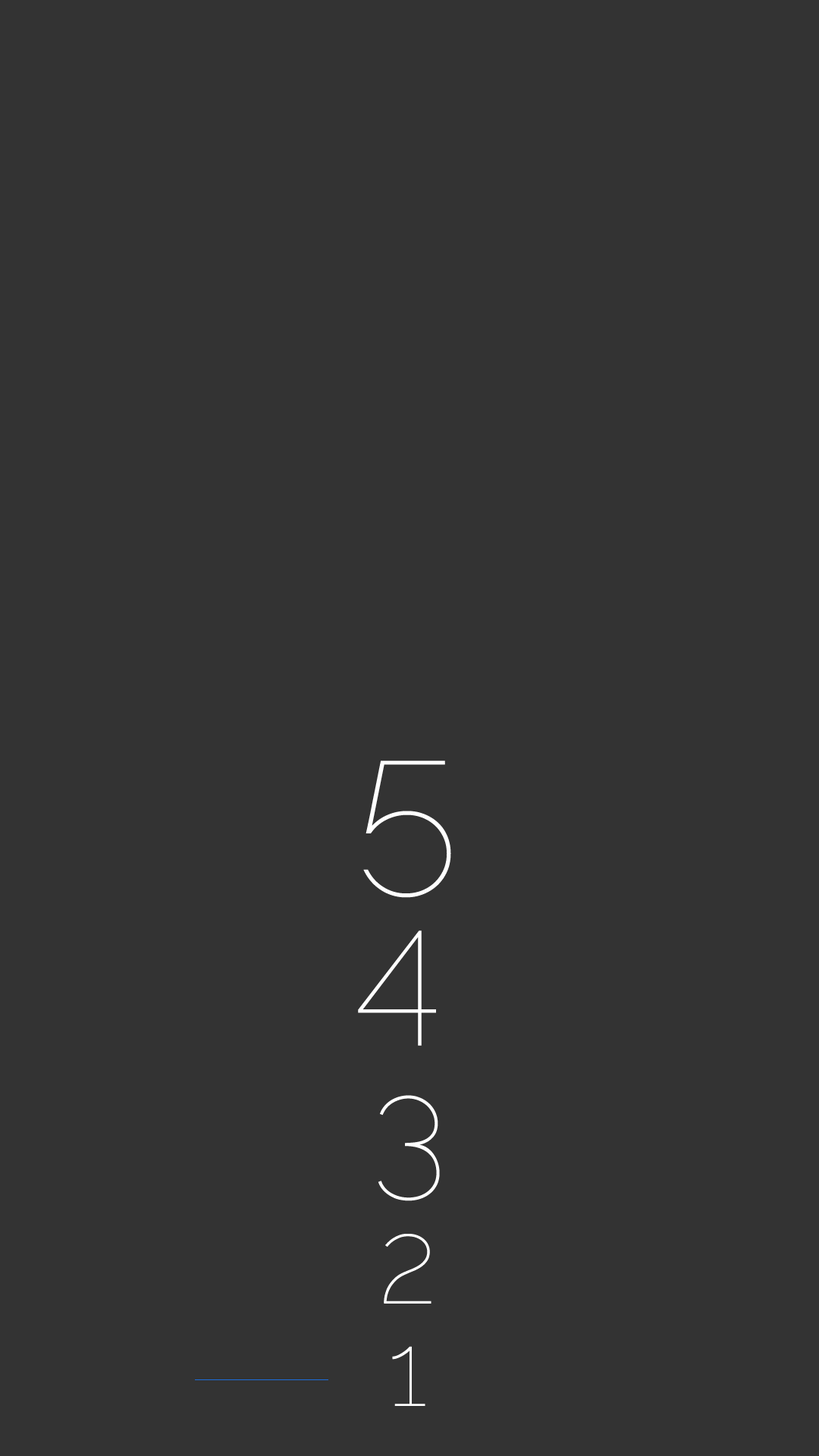
<style>
.page{position:relative;width:819px;height:1456px;background:#333333}
.page>*{position:absolute;margin:0}
.t1{font:189.6px "Raleway-Thin";color:#ffffff}
.t2{font:164.3px "Raleway-Thin";color:#ffffff}
.t3{font:145.3px "Raleway-Thin";color:#ffffff}
.t4{font:120.1px "Raleway-Thin";color:#ffffff}
.t5{font:103.8px "Raleway-Thin";color:#ffffff}
</style>
<div class="page">
<p class="t1" style="left:363px;top:761px;width:88px;height:137px">5</p>
<p class="t2" style="left:358px;top:930px;width:78px;height:116px">4</p>
<p class="t3" style="left:378px;top:1095px;width:62px;height:106px">3</p>
<p class="t4" style="left:384px;top:1234px;width:47px;height:70px">2</p>
<p class="t5" style="left:392px;top:1346px;width:33px;height:60px">1</p>
</div>
